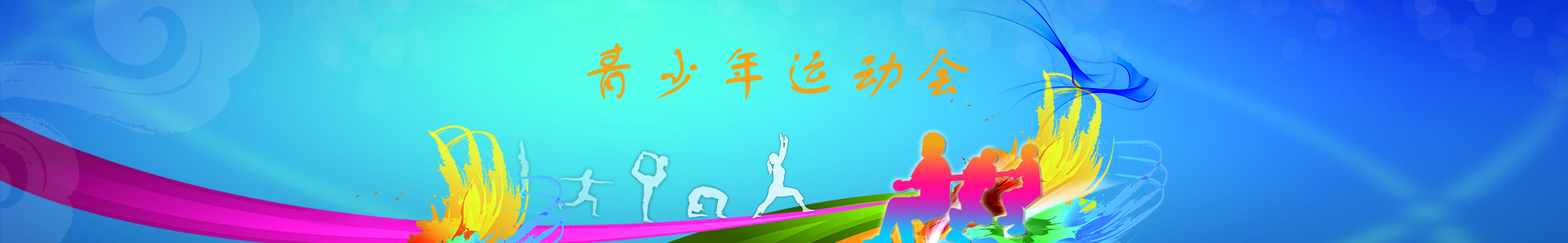
<style>
.page{position:relative;width:1568px;height:243px}
.page>*{position:absolute;margin:0}
.t1{font:60.4px "FZSTK--GBK1-0";letter-spacing:0.1em;color:#eea418}
</style>
<div class="page">
<p class="t1" style="left:587px;top:43px;width:382px;height:57px">青少年运动会</p>
</div>
